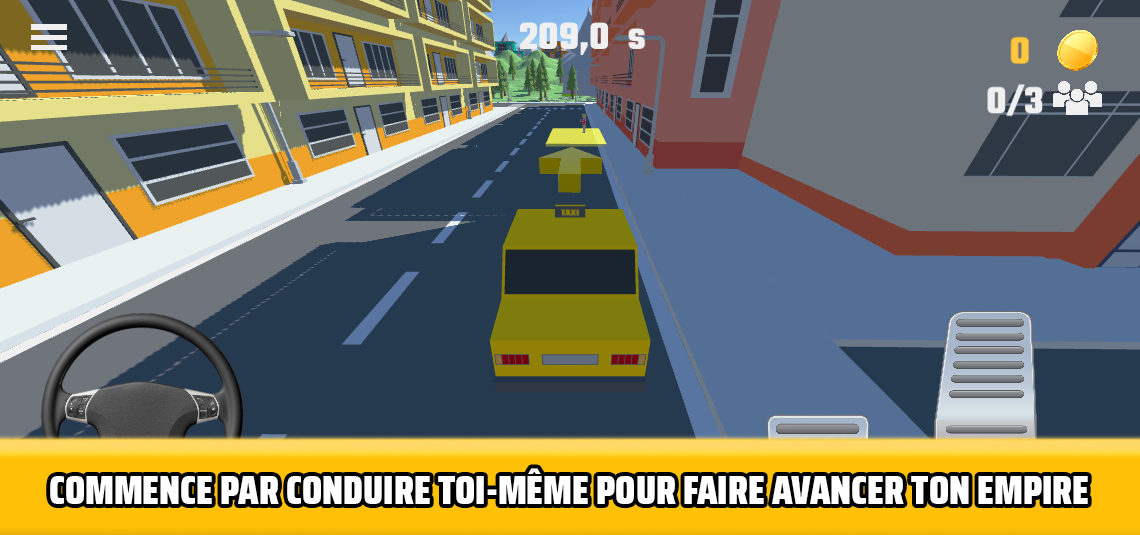
<style>
.page{position:relative;width:1140px;height:535px}
.page>*{position:absolute;margin:0}
.t1{font:39.8px "SairaCondensed-Black";color:#ffffff}
</style>
<div class="page">
<p class="t1" style="left:50px;top:468px;width:1038px;height:36px">COMMENCE PAR CONDUIRE TOI-MÊME POUR FAIRE AVANCER TON EMPIRE</p>
</div>
